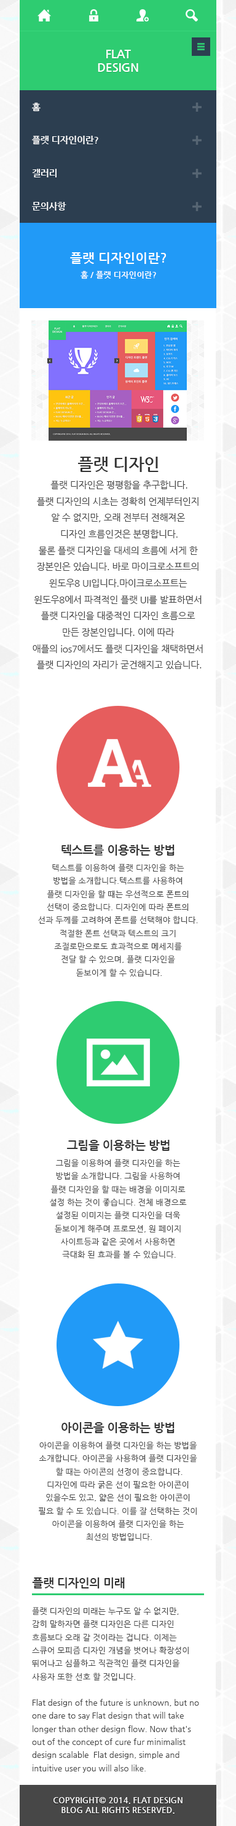
<style>
.page{position:relative;width:236px;height:1826px;background:#ffffff}
.page>*{position:absolute;margin:0}
.t1{font:11.5px "NanumGothicBold";color:#ffffff}
.t2{font:9px "NanumGothicBold";color:#ffffff}
.t3{font:13.1px "NanumGothicBold";color:#ffffff}
.t4{font:8.2px "NanumGothicBold";color:#ffffff}
.t5{font:16.4px "NanumGothicBold";color:#333333}
.t6{font:9px/16.4px "NanumGothic";color:#444444}
.t7{font:11.5px "NanumGothicBold";color:#333333}
.t8{font:8.2px/13.1px "NanumGothic";color:#444444}
</style>
<div class="page">
<p class="t1" style="left:98px;top:50px;width:40px;height:22px;text-align:center">FLAT<br>DESIGN</p>
<p class="t2" style="left:32px;top:102px;width:8px;height:10px">홈</p>
<p class="t2" style="left:32px;top:136px;width:66px;height:9px">플랫 디자인이란?</p>
<p class="t2" style="left:32px;top:169px;width:24px;height:8px">갤러리</p>
<p class="t2" style="left:32px;top:202px;width:34px;height:8px">문의사항</p>
<p class="t3" style="left:70px;top:252px;width:96px;height:12px">플랫 디자인이란?</p>
<p class="t4" style="left:80px;top:271px;width:76px;height:8px">홈 / 플랫 디자인이란?</p>
<p class="t5" style="left:78px;top:457px;width:80px;height:15px">플랫 디자인</p>
<p class="t6" style="left:33px;top:480px;width:169px;height:189px;text-align:center">플랫 디자인은 평평함을 추구합니다.<br>플랫 디자인의 시초는 정확히 언제부터인지 <br>알 수 없지만, 오래 전부터 전해져온 <br>디자인 흐름인것은 분명합니다.<br>물론 플랫 디자인을 대세의 흐름에 서게 한 <br>장본인은 있습니다. 바로 마이크로소프트의 <br>윈도우8 UI입니다.마이크로소프트는 <br>윈도우8에서 파격적인 플랫 UI를 발표하면서 <br>플랫 디자인을 대중적인 디자인 흐름으로 <br>만든 장본인입니다. 이에 따라 <br>애플의 ios7에서도 플랫 디자인을 채택하면서 <br>플랫 디자인의 자리가 굳건해지고 있습니다.</p>
<p class="t7" style="left:61px;top:844px;width:113px;height:11px">텍스트를 이용하는 방법</p>
<p class="t8" style="left:38px;top:863px;width:160px;height:114px;text-align:center">텍스트를 이용하여 플랫 디자인을 하는 <br>방법을 소개합니다.텍스트를 사용하여 <br>플랫 디자인을 할 때는 우선적으로 폰트의 <br>선택이 중요합니다. 디자인에 따라 폰트의 <br>선과 두께를 고려하여 폰트를 선택해야 합니다. <br>적절한 폰트 선택과 텍스트의 크기 <br>조절로만으로도 효과적으로 메세지를 <br>전달 할 수 있으며, 플랫 디자인을 <br>돋보이게 할 수 있습니다.</p>
<p class="t7" style="left:67px;top:1140px;width:102px;height:11px">그림을 이용하는 방법</p>
<p class="t8" style="left:50px;top:1159px;width:137px;height:100px;text-align:center">그림을 이용하여 플랫 디자인을 하는 <br>방법을 소개합니다. 그림을 사용하여 <br>플랫 디자인을 할 때는 배경을 이미지로 <br>설정 하는 것이 좋습니다. 전체 배경으로 <br>설정된 이미지는 플랫 디자인을 더욱 <br>돋보이게 해주며 프로모션, 원 페이지 <br>사이트등과 같은 곳에서 사용하면 <br>극대화 된 효과를 볼 수 있습니다.</p>
<p class="t7" style="left:61px;top:1422px;width:113px;height:11px">아이콘을 이용하는 방법</p>
<p class="t8" style="left:39px;top:1441px;width:158px;height:99px;text-align:center">아이콘을 이용하여 플랫 디자인을 하는 방법을 <br>소개합니다. 아이콘을 사용하여 플랫 디자인을 <br>할 때는 아이콘의 선정이 중요합니다.<br>디자인에 따라 굵은 선이 필요한 아이콘이 <br>있을수도 있고, 얇은 선이 필요한 아이콘이 <br>필요 할 수 도 있습니다. 이를 잘 선택하는 것이 <br>아이콘을 이용하여 플랫 디자인을 하는 <br>최선의 방법입니다.</p>
<p class="t7" style="left:32px;top:1577px;width:93px;height:11px">플랫 디자인의 미래</p>
<p class="t8" style="left:32px;top:1606px;width:156px;height:75px">플랫 디자인의 미래는 누구도 알 수 없지만, <br>감히 말하자면 플랫 디자인은 다른 디자인 <br>흐름보다 오래 갈 것이라는 겁니다. 이제는 <br>스큐어 모피즘 디자인 개념을 벗어나 확장성이 <br>뛰어나고 심플하고 직관적인 플랫 디자인을 <br>사용자 또한 선호 할 것입니다.</p>
<p class="t8" style="left:32px;top:1699px;width:167px;height:73px">Flat design of the future is unknown, but no <br>one dare to say Flat design that will take <br>longer than other design flow. Now that's <br>out of the concept of cure fur minimalist <br>design scalable  Flat design, simple and <br>intuitive user you will also like.</p>
<p class="t4" style="left:53px;top:1797px;width:129px;height:16px;text-align:center">COPYRIGHT© 2014. FLAT DESIGN<br>BLOG ALL RIGHTS RESERVED.</p>
</div>
